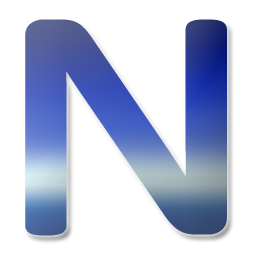
<style>
.page{position:relative;width:256px;height:256px;background:#ffffff}
.page>*{position:absolute;margin:0}
.t1{font:326.2px "Calibri";font-weight:bold;scale:1.23 1}
</style>
<div class="page">
<p class="t1" style="left:25px;top:19px;width:202px;height:217px">N</p>
</div>
